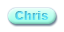
<style>
.page{position:relative;width:64px;height:32px;background:#ffffff}
.page>*{position:absolute;margin:0}
.t1{font:12px "Arial-Black"}
</style>
<div class="page">
<p class="t1" style="left:15px;top:11px;width:34px;height:9px">Chris</p>
</div>
